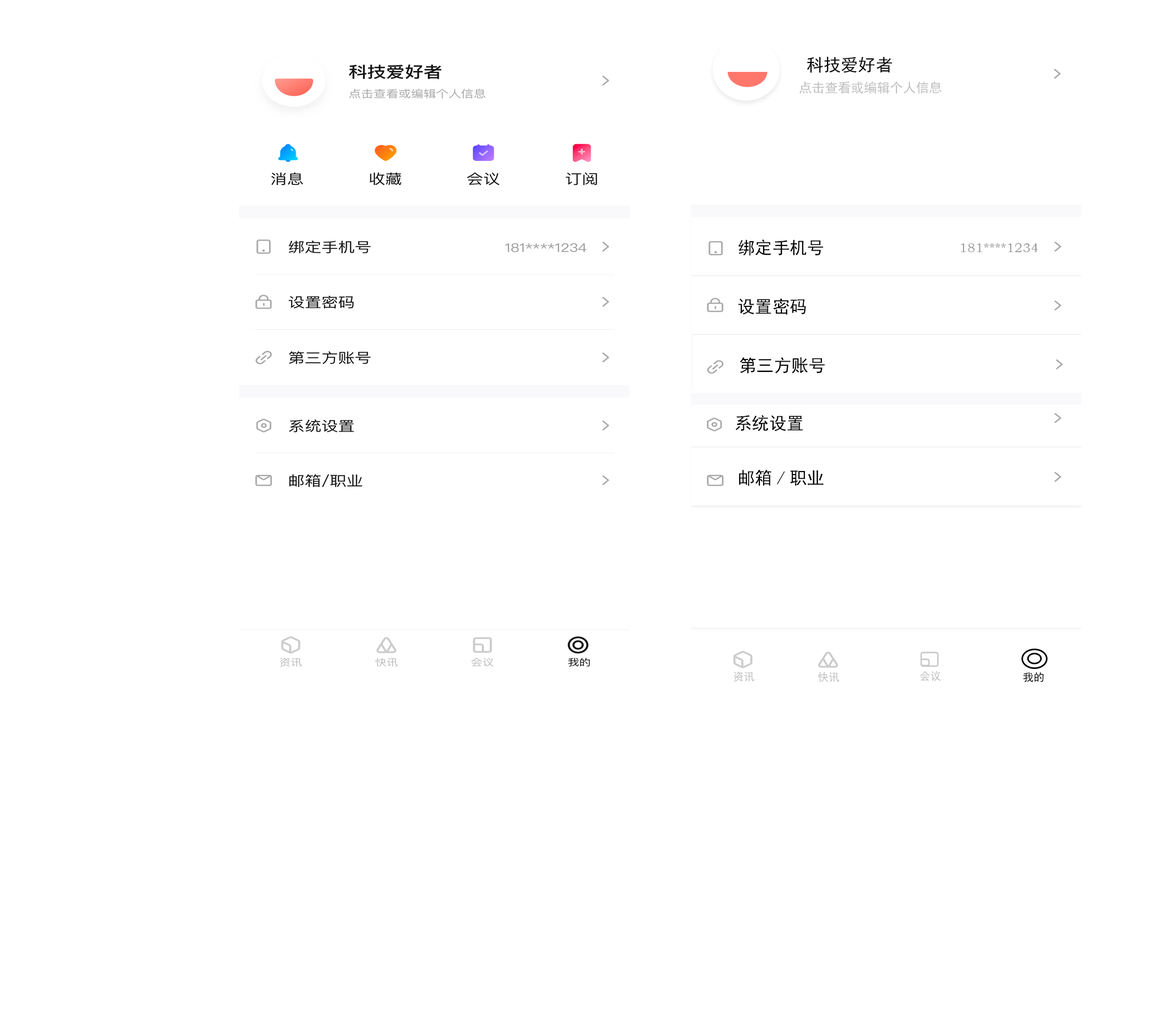
<style>
.page{position:relative;width:1172px;height:1018px;background:#ffffff}
.page>*{position:absolute;margin:0}
.t1{font:17.4px "SimHei";color:#000000}
.t2{font:13px "SimHei";color:#c0c0c0}
.t3{font:13px "STZhongsong";color:#9d9d9d}
.t4{font:10.8px "SimHei";color:#c0c0c0}
.t5{font:10.8px "SimHei";color:#000000}
</style>
<div class="page">
<p class="t1" style="left:807px;top:57px;width:85px;height:16px">科技爱好者</p>
<p class="t2" style="left:799px;top:81px;width:143px;height:13px">点击查看或编辑个人信息</p>
<p class="t1" style="left:738px;top:239px;width:85px;height:17px">绑定手机号</p>
<p class="t3" style="left:961px;top:243px;width:77px;height:10px">181****1234</p>
<p class="t1" style="left:738px;top:298px;width:68px;height:17px">设置密码</p>
<p class="t1" style="left:740px;top:357px;width:85px;height:16px">第三方账号</p>
<p class="t1" style="left:735px;top:415px;width:68px;height:16px">系统设置</p>
<p class="t1" style="left:739px;top:469px;width:84px;height:17px">邮箱/职业</p>
<p class="t4" style="left:733px;top:671px;width:21px;height:11px">资讯</p>
<p class="t4" style="left:818px;top:672px;width:21px;height:10px">快讯</p>
<p class="t4" style="left:920px;top:671px;width:21px;height:10px">会议</p>
<p class="t5" style="left:1023px;top:672px;width:21px;height:10px">我的</p>
</div>
